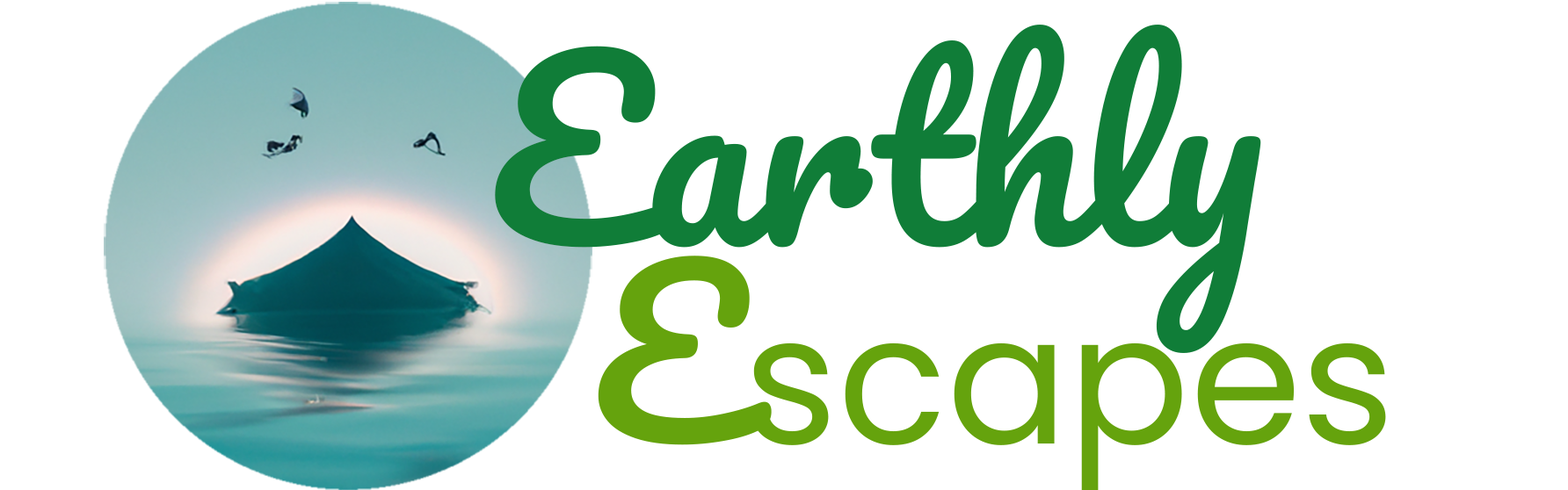
<style>
.page{position:relative;width:1568px;height:490px;background:#ffffff}
.page>*{position:absolute;margin:0}
.t1{font:235.3px "Pacifico-Regular";color:#107d38}
.t2{font:179.9px "Poppins-Regular";color:#65a30d}
.t3{font:221.5px "Pacifico-Regular";color:#65a30d}
</style>
<div class="page">
<p class="t1" style="left:495px;top:25px;width:766px;height:328px">Earthly</p>
<p class="t2" style="left:598px;top:256px;width:788px;height:235px"><span class="t3">E</span>scapes</p>
</div>
